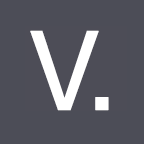
<style>
.page{position:relative;width:144px;height:144px;background:#4c4d57}
.page>*{position:absolute;margin:0}
.t1{font:110px "HelveticaNeue";color:#ffffff;font-weight:bold}
</style>
<div class="page">
<p class="t1" style="left:30px;top:30px;width:79px;height:81px">V.</p>
</div>
